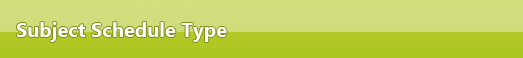
<style>
.page{position:relative;width:523px;height:58px}
.page>*{position:absolute;margin:0}
.t1{font:20px "SegoeUI-Bold";color:#fefefe}
</style>
<div class="page">
<p class="t1" style="left:16px;top:22px;width:211px;height:20px">Subject Schedule Type</p>
</div>
